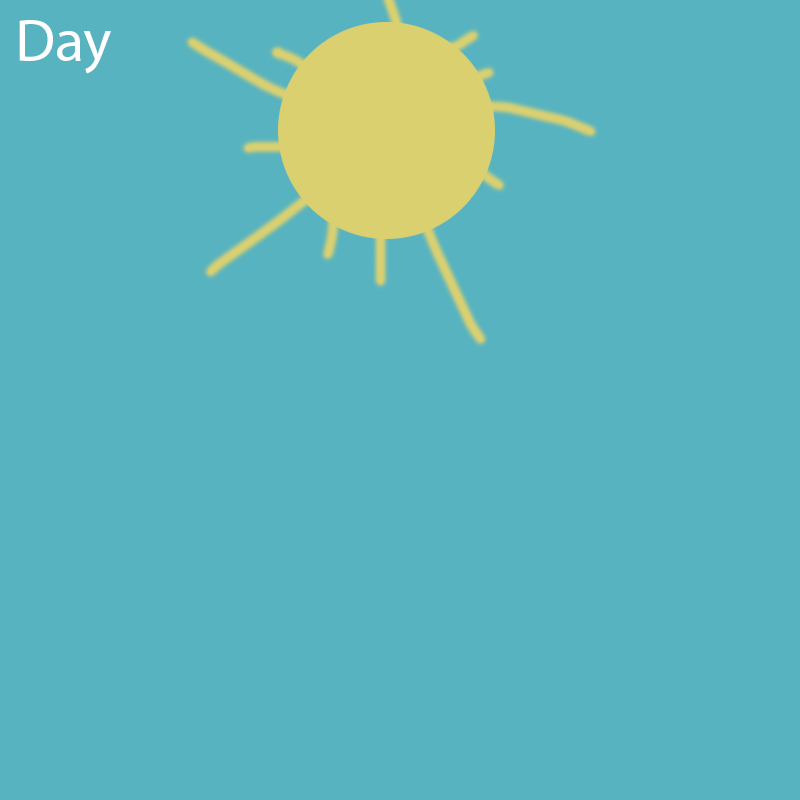
<style>
.page{position:relative;width:800px;height:800px;background:#57b3c0}
.page>*{position:absolute;margin:0}
.t1{font:60px "MyriadPro-Regular";color:#ffffff}
</style>
<div class="page">
<p class="t1" style="left:19px;top:20px;width:92px;height:54px">Day</p>
</div>
